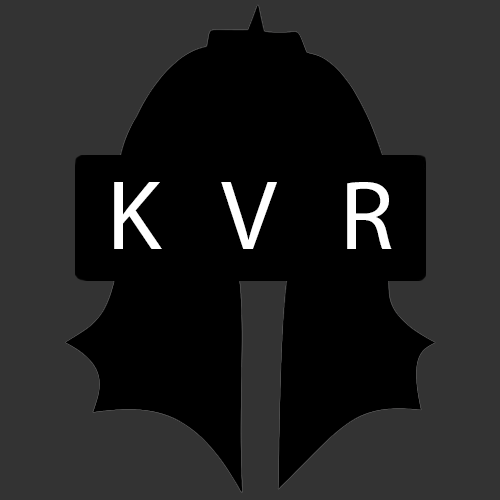
<style>
.page{position:relative;width:500px;height:500px;background:#333333}
.page>*{position:absolute;margin:0}
.t1{font:100px "MyriadPro-Regular";color:#ffffff}
</style>
<div class="page">
<p class="t1" style="left:114px;top:182px;width:278px;height:67px">K   V   R</p>
</div>
